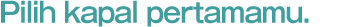
<style>
.page{position:relative;width:357px;height:27px;background:#ffffff}
.page>*{position:absolute;margin:0}
.t1{font:28px "GothicMB101Pro-DeBold";letter-spacing:-0.04em;color:#409e9f;scale:0.95 1}
</style>
<div class="page">
<p class="t1" style="left:1px;top:0px;width:308px;height:27px">Pilih kapal pertamamu.</p>
</div>
